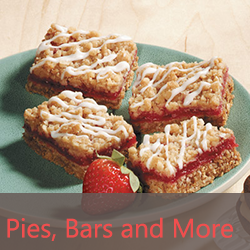
<style>
.page{position:relative;width:250px;height:250px}
.page>*{position:absolute;margin:0}
.t1{font:26.4px "MicrosoftTaiLe";color:#f14e4e}
</style>
<div class="page">
<p class="t1" style="left:7px;top:217px;width:226px;height:24px">Pies, Bars and More</p>
</div>
